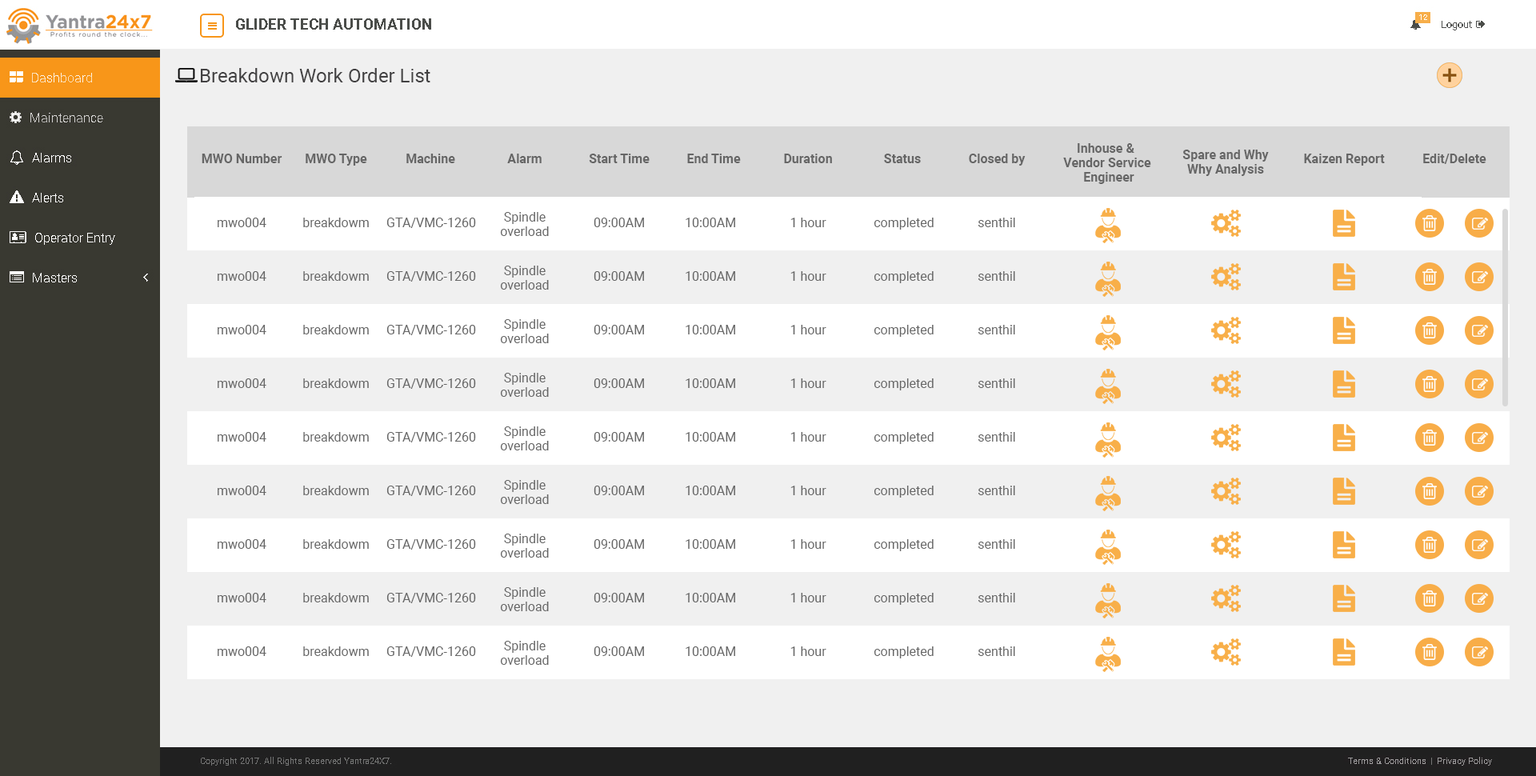
<style>
.page{position:relative;width:1536px;height:776px;background:#f0f0f0}
.page>*{position:absolute;margin:0}
.t1{font:19.2px "Roboto-Regular";color:#424142}
.t2{font:12.8px "Roboto-Bold";color:#666666}
.t3{font:12.8px "Roboto-Regular";color:#666666}
</style>
<div class="page">
<p class="t1" style="left:201px;top:68px;width:229px;height:14px">Breakdown Work Order List</p>
<p class="t2" style="left:1063px;top:143px;width:88px;height:41px;text-align:center">Inhouse &amp; <br>Vendor Service<br> Engineer</p>
<p class="t2" style="left:1183px;top:150px;width:86px;height:26px;text-align:center">Spare and Why<br>Why Analysis</p>
<p class="t2" style="left:202px;top:154px;width:80px;height:9px">MWO Number</p>
<p class="t2" style="left:306px;top:154px;width:61px;height:12px">MWO Type</p>
<p class="t2" style="left:406px;top:154px;width:49px;height:9px">Machine</p>
<p class="t2" style="left:507px;top:154px;width:35px;height:9px">Alarm</p>
<p class="t2" style="left:589px;top:154px;width:61px;height:9px">Start Time</p>
<p class="t2" style="left:687px;top:154px;width:54px;height:9px">End Time</p>
<p class="t2" style="left:784px;top:154px;width:48px;height:9px">Duration</p>
<p class="t2" style="left:884px;top:154px;width:37px;height:9px">Status</p>
<p class="t2" style="left:969px;top:154px;width:57px;height:12px">Closed by</p>
<p class="t2" style="left:1304px;top:154px;width:81px;height:12px">Kaizen Report</p>
<p class="t2" style="left:1423px;top:154px;width:64px;height:10px">Edit/Delete</p>
<p class="t3" style="left:218px;top:218px;width:48px;height:9px">mwo004</p>
<p class="t3" style="left:303px;top:218px;width:66px;height:9px">breakdowm</p>
<p class="t3" style="left:386px;top:218px;width:90px;height:10px">GTA/VMC-1260</p>
<p class="t3" style="left:500px;top:212px;width:49px;height:24px;text-align:center">Spindle<br>overload</p>
<p class="t3" style="left:594px;top:218px;width:50px;height:9px">09:00AM</p>
<p class="t3" style="left:686px;top:218px;width:49px;height:9px">10:00AM</p>
<p class="t3" style="left:791px;top:218px;width:36px;height:9px">1 hour</p>
<p class="t3" style="left:874px;top:218px;width:60px;height:12px">completed</p>
<p class="t3" style="left:978px;top:218px;width:37px;height:9px">senthil</p>
<p class="t3" style="left:500px;top:266px;width:49px;height:24px;text-align:center">Spindle<br>overload</p>
<p class="t3" style="left:218px;top:271px;width:48px;height:10px">mwo004</p>
<p class="t3" style="left:303px;top:271px;width:66px;height:10px">breakdowm</p>
<p class="t3" style="left:386px;top:271px;width:90px;height:11px">GTA/VMC-1260</p>
<p class="t3" style="left:594px;top:271px;width:50px;height:10px">09:00AM</p>
<p class="t3" style="left:686px;top:271px;width:49px;height:10px">10:00AM</p>
<p class="t3" style="left:791px;top:271px;width:36px;height:10px">1 hour</p>
<p class="t3" style="left:874px;top:271px;width:60px;height:12px">completed</p>
<p class="t3" style="left:978px;top:271px;width:37px;height:10px">senthil</p>
<p class="t3" style="left:218px;top:325px;width:48px;height:9px">mwo004</p>
<p class="t3" style="left:303px;top:325px;width:66px;height:9px">breakdowm</p>
<p class="t3" style="left:386px;top:325px;width:90px;height:10px">GTA/VMC-1260</p>
<p class="t3" style="left:500px;top:319px;width:49px;height:24px;text-align:center">Spindle<br>overload</p>
<p class="t3" style="left:594px;top:325px;width:50px;height:9px">09:00AM</p>
<p class="t3" style="left:686px;top:325px;width:49px;height:9px">10:00AM</p>
<p class="t3" style="left:791px;top:325px;width:36px;height:9px">1 hour</p>
<p class="t3" style="left:874px;top:325px;width:60px;height:12px">completed</p>
<p class="t3" style="left:978px;top:325px;width:37px;height:9px">senthil</p>
<p class="t3" style="left:500px;top:373px;width:49px;height:24px;text-align:center">Spindle<br>overload</p>
<p class="t3" style="left:218px;top:378px;width:48px;height:10px">mwo004</p>
<p class="t3" style="left:303px;top:378px;width:66px;height:10px">breakdowm</p>
<p class="t3" style="left:386px;top:378px;width:90px;height:11px">GTA/VMC-1260</p>
<p class="t3" style="left:594px;top:378px;width:50px;height:10px">09:00AM</p>
<p class="t3" style="left:686px;top:378px;width:49px;height:10px">10:00AM</p>
<p class="t3" style="left:791px;top:378px;width:36px;height:10px">1 hour</p>
<p class="t3" style="left:874px;top:378px;width:60px;height:12px">completed</p>
<p class="t3" style="left:978px;top:378px;width:37px;height:10px">senthil</p>
<p class="t3" style="left:218px;top:432px;width:48px;height:10px">mwo004</p>
<p class="t3" style="left:303px;top:432px;width:66px;height:10px">breakdowm</p>
<p class="t3" style="left:386px;top:432px;width:90px;height:10px">GTA/VMC-1260</p>
<p class="t3" style="left:500px;top:426px;width:49px;height:24px;text-align:center">Spindle<br>overload</p>
<p class="t3" style="left:594px;top:432px;width:50px;height:10px">09:00AM</p>
<p class="t3" style="left:686px;top:432px;width:49px;height:10px">10:00AM</p>
<p class="t3" style="left:791px;top:432px;width:36px;height:10px">1 hour</p>
<p class="t3" style="left:874px;top:432px;width:60px;height:12px">completed</p>
<p class="t3" style="left:978px;top:432px;width:37px;height:10px">senthil</p>
<p class="t3" style="left:218px;top:486px;width:48px;height:9px">mwo004</p>
<p class="t3" style="left:303px;top:486px;width:66px;height:9px">breakdowm</p>
<p class="t3" style="left:386px;top:486px;width:90px;height:10px">GTA/VMC-1260</p>
<p class="t3" style="left:500px;top:480px;width:49px;height:24px;text-align:center">Spindle<br>overload</p>
<p class="t3" style="left:594px;top:486px;width:50px;height:9px">09:00AM</p>
<p class="t3" style="left:686px;top:486px;width:49px;height:9px">10:00AM</p>
<p class="t3" style="left:791px;top:486px;width:36px;height:9px">1 hour</p>
<p class="t3" style="left:874px;top:486px;width:60px;height:12px">completed</p>
<p class="t3" style="left:978px;top:486px;width:37px;height:9px">senthil</p>
<p class="t3" style="left:500px;top:534px;width:49px;height:24px;text-align:center">Spindle<br>overload</p>
<p class="t3" style="left:218px;top:539px;width:48px;height:10px">mwo004</p>
<p class="t3" style="left:303px;top:539px;width:66px;height:10px">breakdowm</p>
<p class="t3" style="left:386px;top:539px;width:90px;height:11px">GTA/VMC-1260</p>
<p class="t3" style="left:594px;top:539px;width:50px;height:10px">09:00AM</p>
<p class="t3" style="left:686px;top:539px;width:49px;height:10px">10:00AM</p>
<p class="t3" style="left:791px;top:539px;width:36px;height:10px">1 hour</p>
<p class="t3" style="left:874px;top:539px;width:60px;height:12px">completed</p>
<p class="t3" style="left:978px;top:539px;width:37px;height:10px">senthil</p>
<p class="t3" style="left:218px;top:593px;width:48px;height:10px">mwo004</p>
<p class="t3" style="left:303px;top:593px;width:66px;height:10px">breakdowm</p>
<p class="t3" style="left:386px;top:593px;width:90px;height:10px">GTA/VMC-1260</p>
<p class="t3" style="left:500px;top:587px;width:49px;height:24px;text-align:center">Spindle<br>overload</p>
<p class="t3" style="left:594px;top:593px;width:50px;height:10px">09:00AM</p>
<p class="t3" style="left:686px;top:593px;width:49px;height:10px">10:00AM</p>
<p class="t3" style="left:791px;top:593px;width:36px;height:10px">1 hour</p>
<p class="t3" style="left:874px;top:593px;width:60px;height:12px">completed</p>
<p class="t3" style="left:978px;top:593px;width:37px;height:10px">senthil</p>
<p class="t3" style="left:500px;top:641px;width:49px;height:24px;text-align:center">Spindle<br>overload</p>
<p class="t3" style="left:218px;top:647px;width:48px;height:9px">mwo004</p>
<p class="t3" style="left:303px;top:647px;width:66px;height:9px">breakdowm</p>
<p class="t3" style="left:386px;top:647px;width:90px;height:10px">GTA/VMC-1260</p>
<p class="t3" style="left:594px;top:647px;width:50px;height:9px">09:00AM</p>
<p class="t3" style="left:686px;top:647px;width:49px;height:9px">10:00AM</p>
<p class="t3" style="left:791px;top:647px;width:36px;height:9px">1 hour</p>
<p class="t3" style="left:874px;top:647px;width:60px;height:12px">completed</p>
<p class="t3" style="left:978px;top:647px;width:37px;height:9px">senthil</p>
</div>
